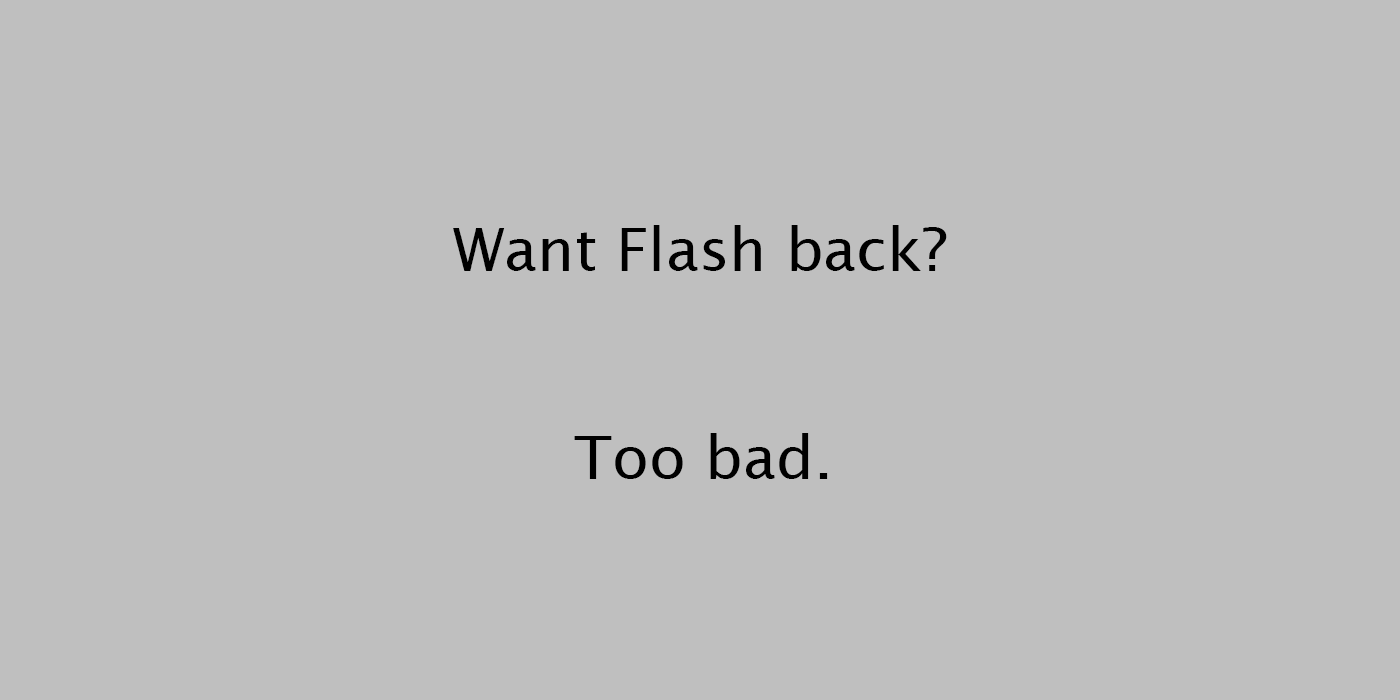
<style>
.page{position:relative;width:1400px;height:700px;background:#bfbfbf}
.page>*{position:absolute;margin:0}
.t1{font:60px "LucidaSans";color:#000000}
</style>
<div class="page">
<p class="t1" style="left:453px;top:225px;width:494px;height:46px">Want Flash back?</p>
<p class="t1" style="left:574px;top:433px;width:254px;height:46px">Too bad.</p>
</div>
